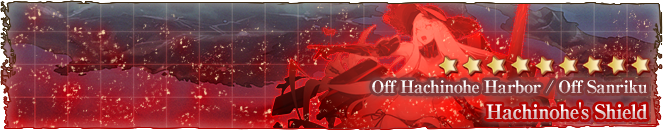
<style>
.page{position:relative;width:663px;height:130px}
.page>*{position:absolute;margin:0}
.t1{font:17px "RyuminPro-ExBold";letter-spacing:-0.04em}
.t2{font:20px "RyuminPro-ExBold";letter-spacing:-0.04em;color:#dec8c8}
</style>
<div class="page">
<p class="t1" style="left:372px;top:80px;width:275px;height:14px">Off Hachinohe Harbor / Off Sanriku</p>
<p class="t2" style="left:486px;top:102px;width:161px;height:18px">Hachinohe's Shield</p>
</div>
